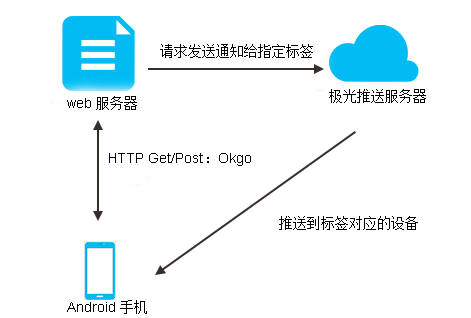
<style>
.page{position:relative;width:471px;height:318px;background:#ffffff}
.page>*{position:absolute;margin:0}
.t1{font:14px "SimSun";color:#020202}
.t2{font:14.4px "SimSun";color:#020202}
.t3{font:14.4px "ArialMT";color:#020202}
.t4{font:14px "ArialMT";color:#020202}
</style>
<div class="page">
<p class="t1" style="left:160px;top:44px;width:153px;height:14px">请求发送通知给指定标签</p>
<p class="t2" style="left:329px;top:89px;width:97px;height:14px">极光推送服务器</p>
<p class="t3" style="left:67px;top:96px;width:70px;height:14px">web <span class="t2">服务器</span></p>
<p class="t4" style="left:109px;top:153px;width:142px;height:13px">HTTP Get/Post <span class="t1">：</span> Okgo</p>
<p class="t1" style="left:279px;top:216px;width:139px;height:14px">推送到标签对应的设备</p>
<p class="t3" style="left:67px;top:300px;width:80px;height:14px">Android<span class="t2">手机</span></p>
</div>
